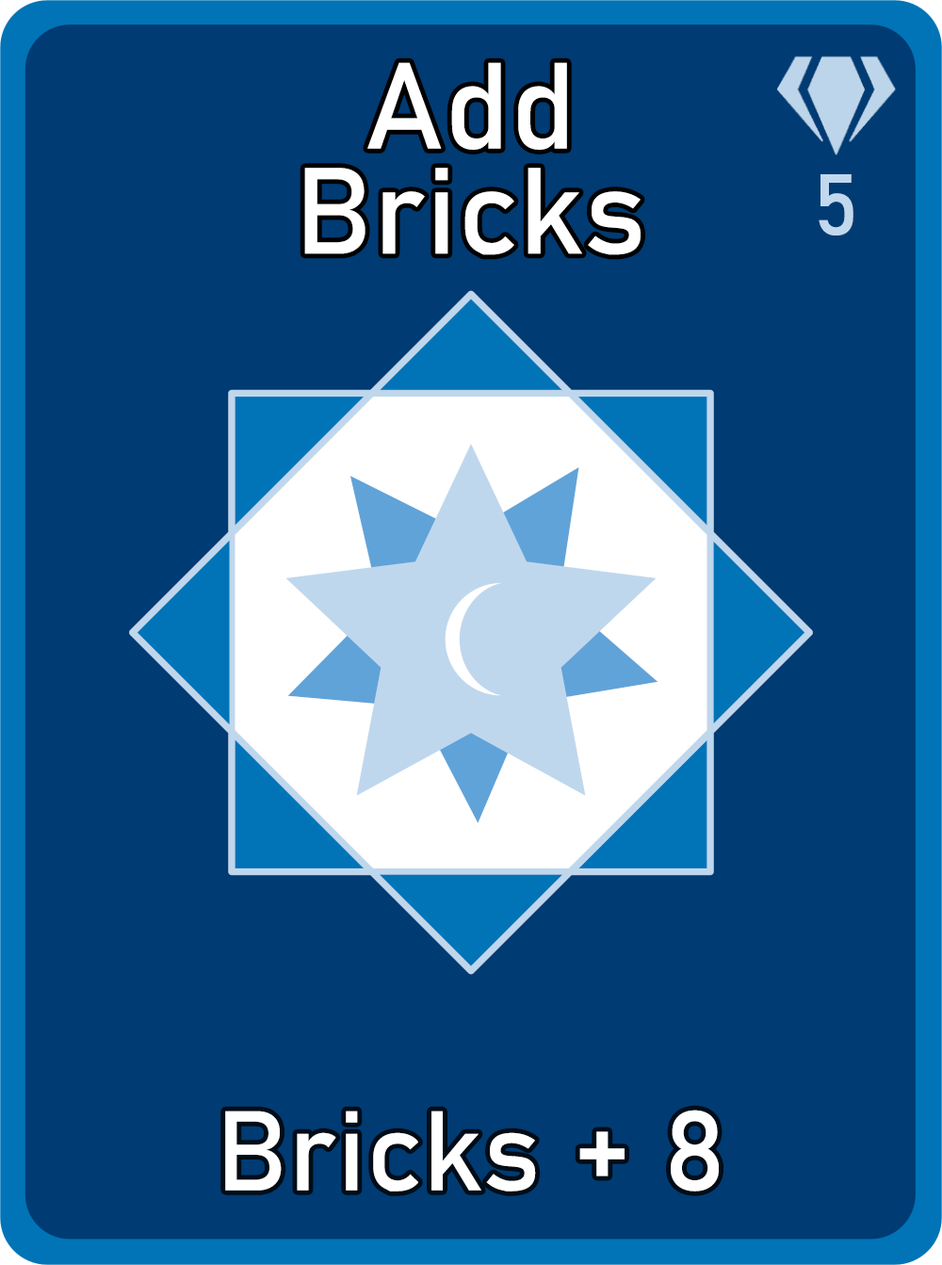
<style>
.page{position:relative;width:942px;height:1265px;background:#003b73}
.page>*{position:absolute;margin:0}
.t1{font:120.6px/105.1px "Bahnschrift";letter-spacing:0.01em;color:#ffffff}
.t2{font:85px "Bahnschrift";letter-spacing:0.01em;color:#c1d8ed}
.t3{font:111.3px "Bahnschrift";letter-spacing:0.01em;color:#ffffff}
</style>
<div class="page">
<p class="t1" style="left:304px;top:62px;width:337px;height:193px;text-align:center">Add<br>Bricks</p>
<p class="t2" style="left:819px;top:174px;width:35px;height:62px">5</p>
<p class="t3" style="left:225px;top:1110px;width:494px;height:82px">Bricks + 8</p>
</div>
